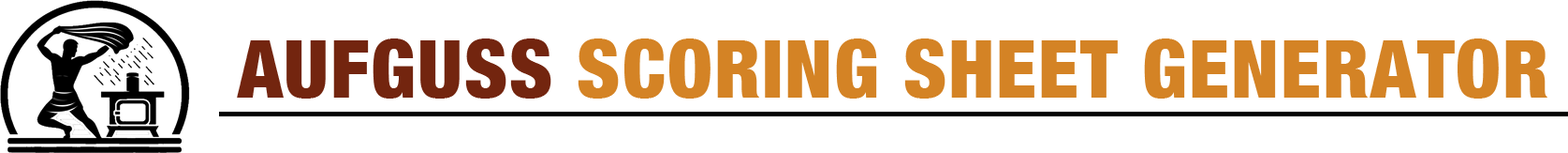
<style>
.page{position:relative;width:1568px;height:153px;background:#ffffff}
.page>*{position:absolute;margin:0}
.t1{font:80.9px "HelveticaNeue-CondensedBlack";letter-spacing:0.02em;color:#d48325}
.t2{font:80.9px "HelveticaNeue-CondensedBlack";letter-spacing:0.02em;color:#73250f}
</style>
<div class="page">
<p class="t1" style="left:237px;top:38px;width:1310px;height:60px"><span class="t2">AUFGUSS </span>SCORING SHEET GENERATOR</p>
</div>
